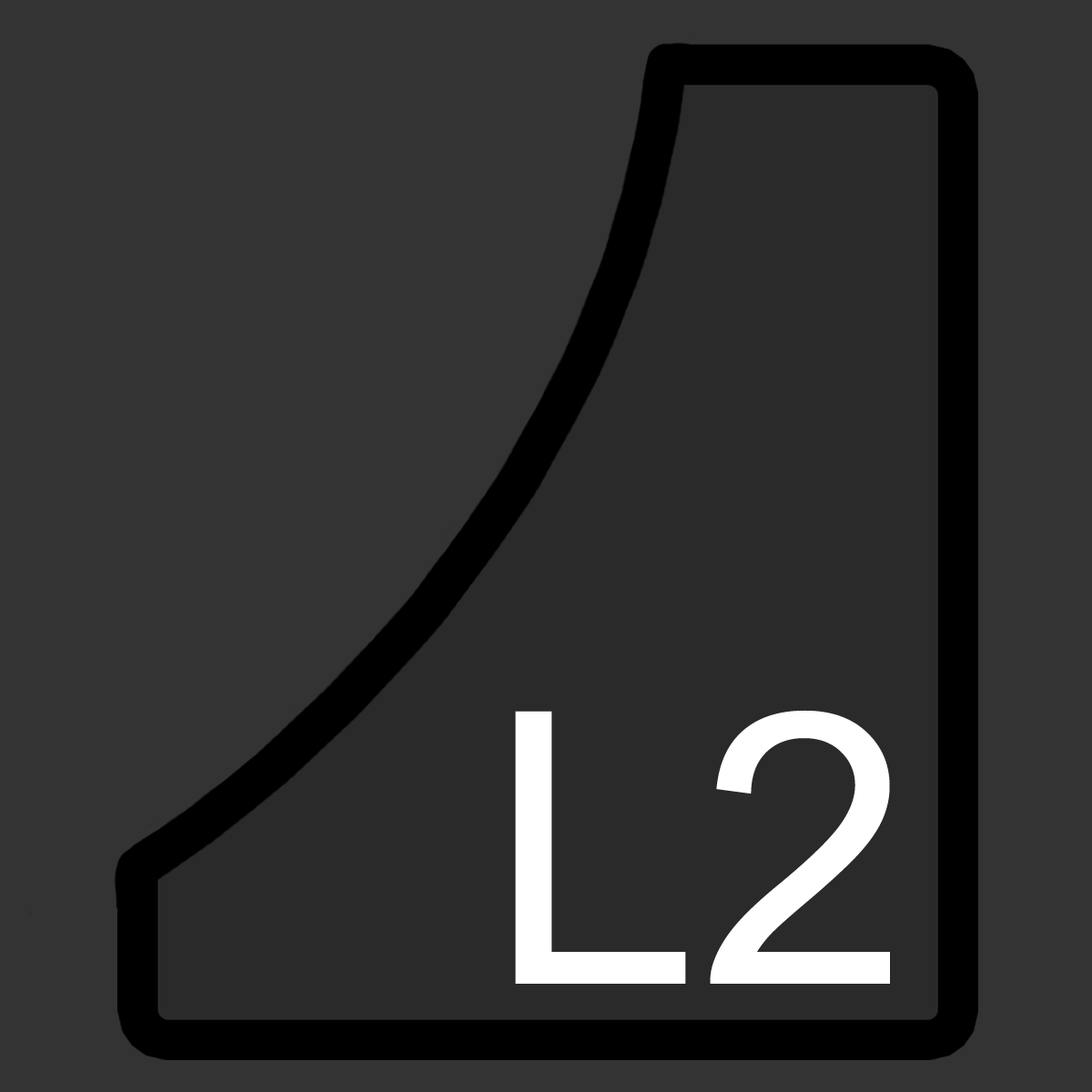
<style>
.page{position:relative;width:1092px;height:1092px;background:#333333}
.page>*{position:absolute;margin:0}
.t1{font:379.2px "ArialMT";color:#ffffff}
</style>
<div class="page">
<p class="t1" style="left:515px;top:710px;width:375px;height:274px">L2</p>
</div>
